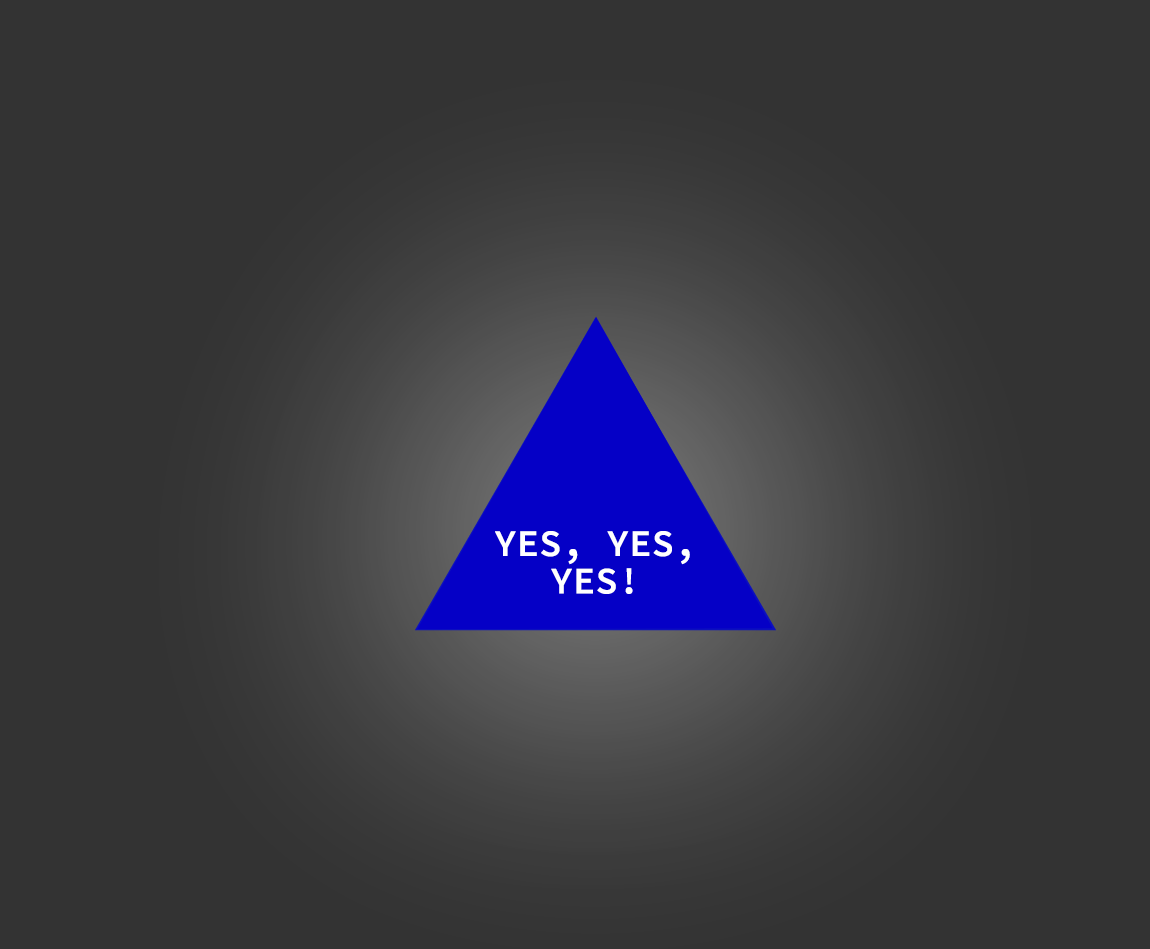
<style>
.page{position:relative;width:1150px;height:949px;background:#333333}
.page>*{position:absolute;margin:0}
.t1{font:37.5px "SourceCodeRoman-Semibold";color:#ffffff}
</style>
<div class="page">
<p class="t1" style="left:495px;top:531px;width:195px;height:63px">YES, YES, YES!</p>
</div>
